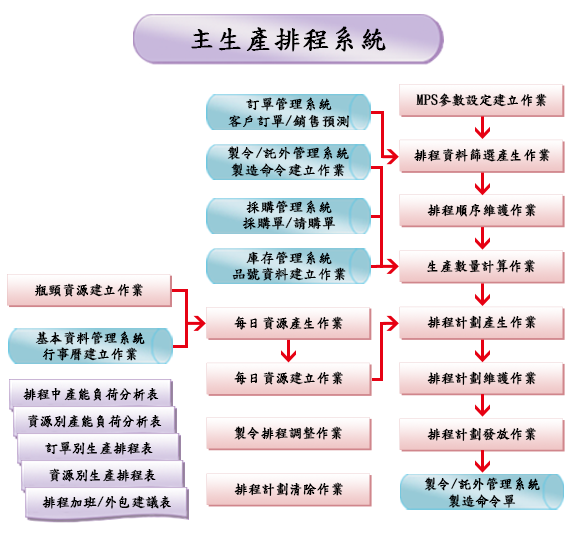
<style>
.page{position:relative;width:577px;height:545px;background:#ffffff}
.page>*{position:absolute;margin:0}
.t1{font:27.5px "DFKaiShu-SB-Estd-BF";color:#000000;font-weight:bold}
.t2{font:13.7px/16.5px "DFKaiShu-SB-Estd-BF";color:#000000;font-weight:bold}
.t3{font:13.7px "DFKaiShu-SB-Estd-BF";color:#000000;font-weight:bold}
</style>
<div class="page">
<p class="t1" style="left:191px;top:26px;width:195px;height:26px">主生產排程系統</p>
<p class="t2" style="left:228px;top:97px;width:122px;height:31px;text-align:center">訂單管理系統<br>客戶訂單/銷售預測</p>
<p class="t3" style="left:416px;top:93px;width:131px;height:14px">MPS參數設定建立作業</p>
<p class="t2" style="left:227px;top:146px;width:122px;height:31px;text-align:center">製令/託外管理系統<br>製造命令建立作業</p>
<p class="t3" style="left:414px;top:148px;width:136px;height:14px">排程資料篩選產生作業</p>
<p class="t2" style="left:242px;top:200px;width:94px;height:30px;text-align:center">採購管理系統<br>採購單/請購單</p>
<p class="t3" style="left:427px;top:203px;width:109px;height:14px">排程順序維護作業</p>
<p class="t2" style="left:232px;top:251px;width:114px;height:30px;text-align:center">庫存管理系統<br>品號資料建立作業</p>
<p class="t3" style="left:427px;top:259px;width:108px;height:14px">生產數量計算作業</p>
<p class="t3" style="left:35px;top:283px;width:108px;height:14px">瓶頸資源建立作業</p>
<p class="t3" style="left:234px;top:316px;width:109px;height:14px">每日資源產生作業</p>
<p class="t3" style="left:427px;top:315px;width:109px;height:14px">排程計劃產生作業</p>
<p class="t2" style="left:35px;top:331px;width:110px;height:30px;text-align:center">基本資料管理系統<br>行事曆建立作業</p>
<p class="t3" style="left:234px;top:371px;width:109px;height:14px">每日資源建立作業</p>
<p class="t3" style="left:427px;top:371px;width:109px;height:14px">排程計劃維護作業</p>
<p class="t3" style="left:23px;top:388px;width:136px;height:13px">排程中產能負荷分析表</p>
<p class="t3" style="left:28px;top:414px;width:134px;height:14px">資源別產能負荷分析表</p>
<p class="t3" style="left:234px;top:426px;width:108px;height:14px">製令排程調整作業</p>
<p class="t3" style="left:427px;top:427px;width:109px;height:14px">排程計劃發放作業</p>
<p class="t3" style="left:45px;top:441px;width:108px;height:14px">訂單別生產排程表</p>
<p class="t3" style="left:49px;top:468px;width:107px;height:14px">資源別生產排程表</p>
<p class="t3" style="left:234px;top:482px;width:109px;height:14px">排程計劃清除作業</p>
<p class="t2" style="left:424px;top:477px;width:116px;height:31px;text-align:center">製令/託外管理系統<br>製造命令單</p>
<p class="t3" style="left:42px;top:495px;width:129px;height:14px">排程加班/外包建議表</p>
</div>
